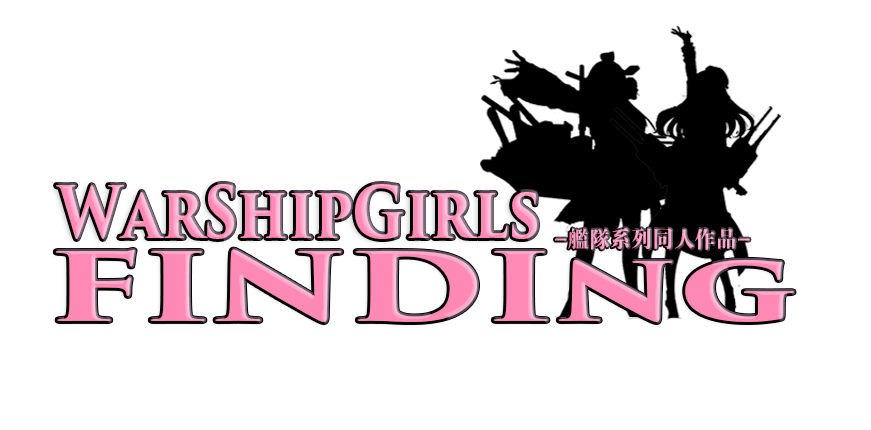
<style>
.page{position:relative;width:871px;height:430px;background:#ffffff}
.page>*{position:absolute;margin:0}
.t1{font:70.1px "TrajanPro3-Bold";color:#ff9dc3;scale:0.82 1}
.t2{font:22.8px "FZDBSFW--GB1-0";color:#ffa4c8;scale:0.93 1}
.t3{font:92.9px "TrajanPro3-Bold";color:#ff89b5;scale:1.56 1}
</style>
<div class="page">
<p class="t1" style="left:56px;top:184px;width:481px;height:55px">WarShipGirls</p>
<p class="t2" style="left:555px;top:228px;width:195px;height:22px">-舰队系列同人作品-</p>
<p class="t3" style="left:55px;top:249px;width:739px;height:73px">FINDIng</p>
</div>
